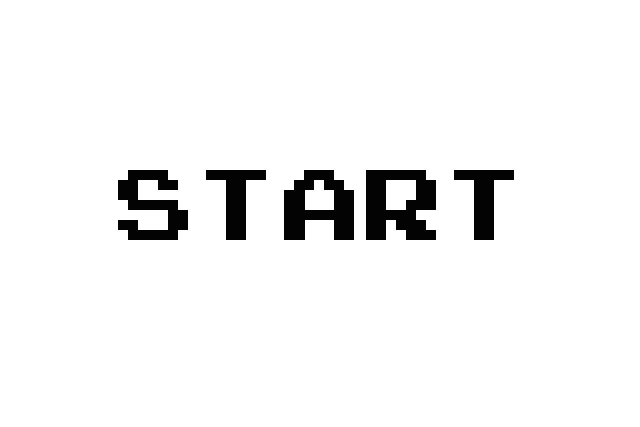
<style>
.page{position:relative;width:640px;height:427px;background:#ffffff}
.page>*{position:absolute;margin:0}
.t1{font:100px "JoystixMonospace-Regular";color:#000000}
</style>
<div class="page">
<p class="t1" style="left:118px;top:170px;width:396px;height:70px">START</p>
</div>
